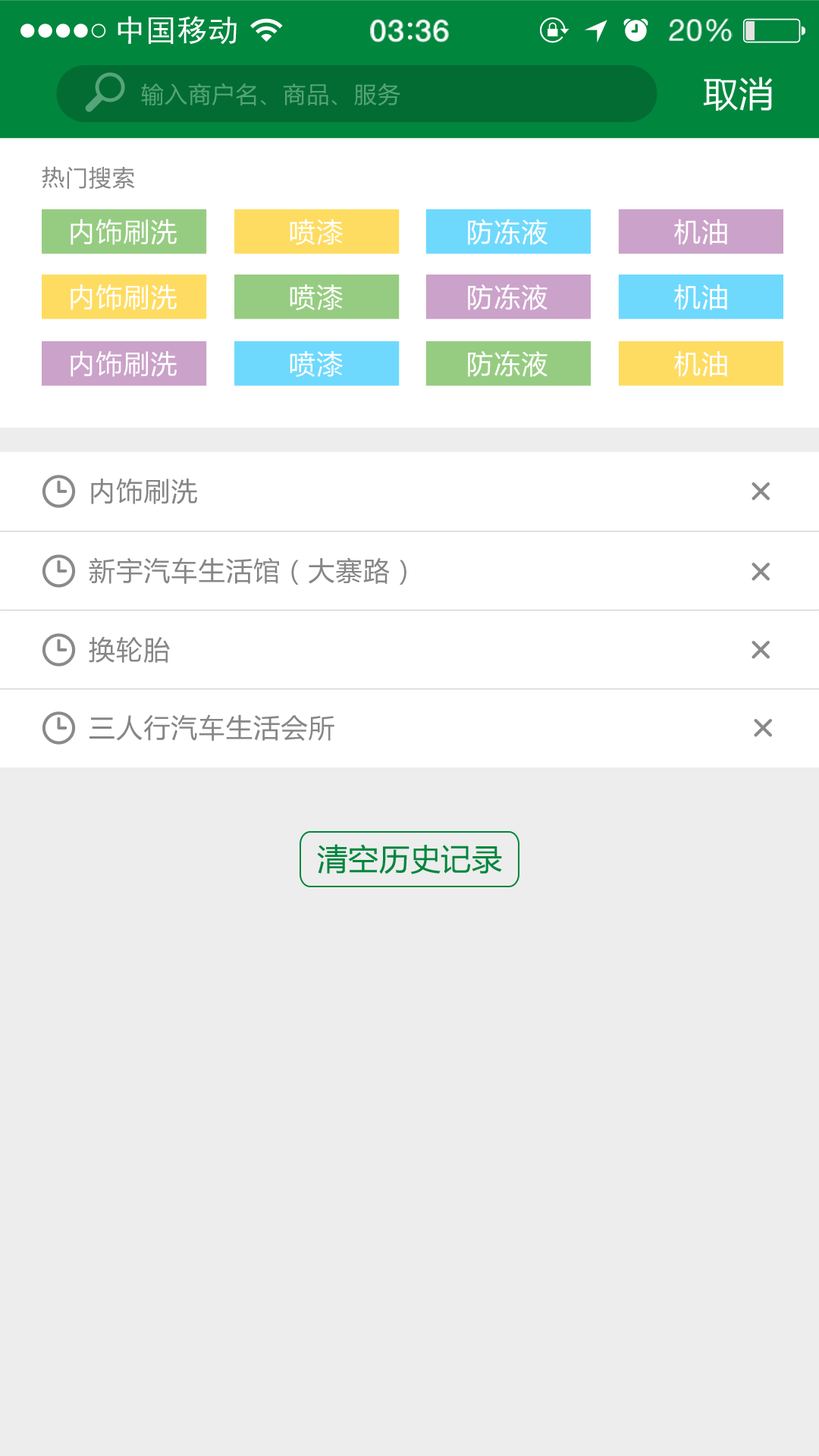
<style>
.page{position:relative;width:819px;height:1456px;background:#ededed}
.page>*{position:absolute;margin:0}
.t1{font:34.8px "MicrosoftYaHei";letter-spacing:0.02em;color:#ffffff}
.t2{font:22.7px "MicrosoftYaHei";letter-spacing:0.04em;color:#56a479}
.t3{font:22.7px "MicrosoftYaHei";letter-spacing:0.04em;color:#868686}
.t4{font:26.5px "MicrosoftYaHei";letter-spacing:0.04em;color:#ffffff}
.t5{font:26.5px "MicrosoftYaHei";letter-spacing:0.04em;color:#868686}
.t6{font:30.3px "MicrosoftYaHei";letter-spacing:0.02em;color:#00863d}
</style>
<div class="page">
<p class="t1" style="left:703px;top:77px;width:70px;height:34px">取消</p>
<p class="t2" style="left:141px;top:83px;width:259px;height:23px">输入商户名、商品、服务</p>
<p class="t3" style="left:42px;top:166px;width:93px;height:23px">热门搜索</p>
<p class="t4" style="left:71px;top:219px;width:106px;height:26px">内饰刷洗</p>
<p class="t4" style="left:290px;top:219px;width:53px;height:26px">喷漆</p>
<p class="t4" style="left:468px;top:218px;width:80px;height:27px">防冻液</p>
<p class="t4" style="left:674px;top:219px;width:53px;height:26px">机油</p>
<p class="t4" style="left:71px;top:284px;width:106px;height:26px">内饰刷洗</p>
<p class="t4" style="left:290px;top:284px;width:53px;height:26px">喷漆</p>
<p class="t4" style="left:468px;top:284px;width:80px;height:26px">防冻液</p>
<p class="t4" style="left:674px;top:284px;width:53px;height:26px">机油</p>
<p class="t4" style="left:71px;top:351px;width:106px;height:26px">内饰刷洗</p>
<p class="t4" style="left:290px;top:351px;width:53px;height:26px">喷漆</p>
<p class="t4" style="left:468px;top:350px;width:80px;height:27px">防冻液</p>
<p class="t4" style="left:674px;top:351px;width:53px;height:26px">机油</p>
<p class="t5" style="left:91px;top:479px;width:106px;height:25px">内饰刷洗</p>
<p class="t5" style="left:89px;top:557px;width:317px;height:28px">新宇汽车生活馆（大寨路）</p>
<p class="t5" style="left:89px;top:636px;width:81px;height:27px">换轮胎</p>
<p class="t5" style="left:89px;top:714px;width:245px;height:27px">三人行汽车生活会所</p>
<p class="t6" style="left:317px;top:844px;width:185px;height:30px">清空历史记录</p>
</div>
